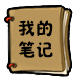
<style>
.page{position:relative;width:80px;height:80px;background:#ffffff}
.page>*{position:absolute;margin:0}
.t1{font:18px "FZSEK--GBK1-0";color:#000000}
</style>
<div class="page">
<p class="t1" style="left:18px;top:20px;width:35px;height:38px">我的<br>笔记</p>
</div>
